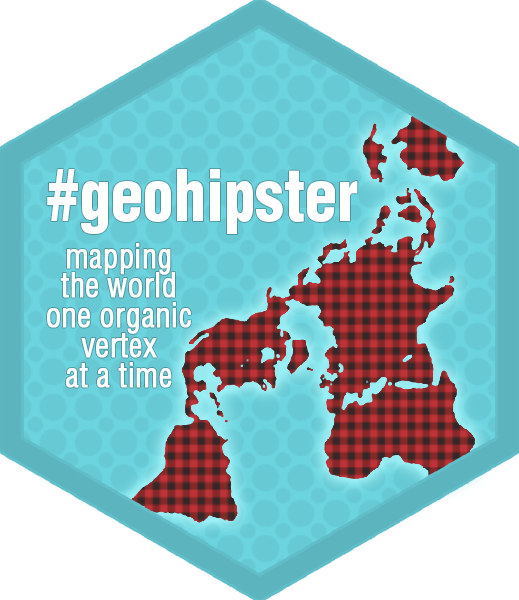
<style>
.page{position:relative;width:519px;height:600px;background:#ffffff}
.page>*{position:absolute;margin:0}
.t1{font:70px "Helvetica-Condensed-Black";color:#ffffff;scale:0.91 1}
.t2{font:32.7px/29.7px "Helvetica-Condensed";color:#ffffff;font-weight:bold;scale:0.91 1}
</style>
<div class="page">
<p class="t1" style="left:47px;top:169px;width:311px;height:65px">#geohipster</p>
<p class="t2" style="left:47px;top:243px;width:144px;height:145px;text-align:center">mapping<br>the world<br>one organic<br>vertex<br>at a time</p>
</div>
